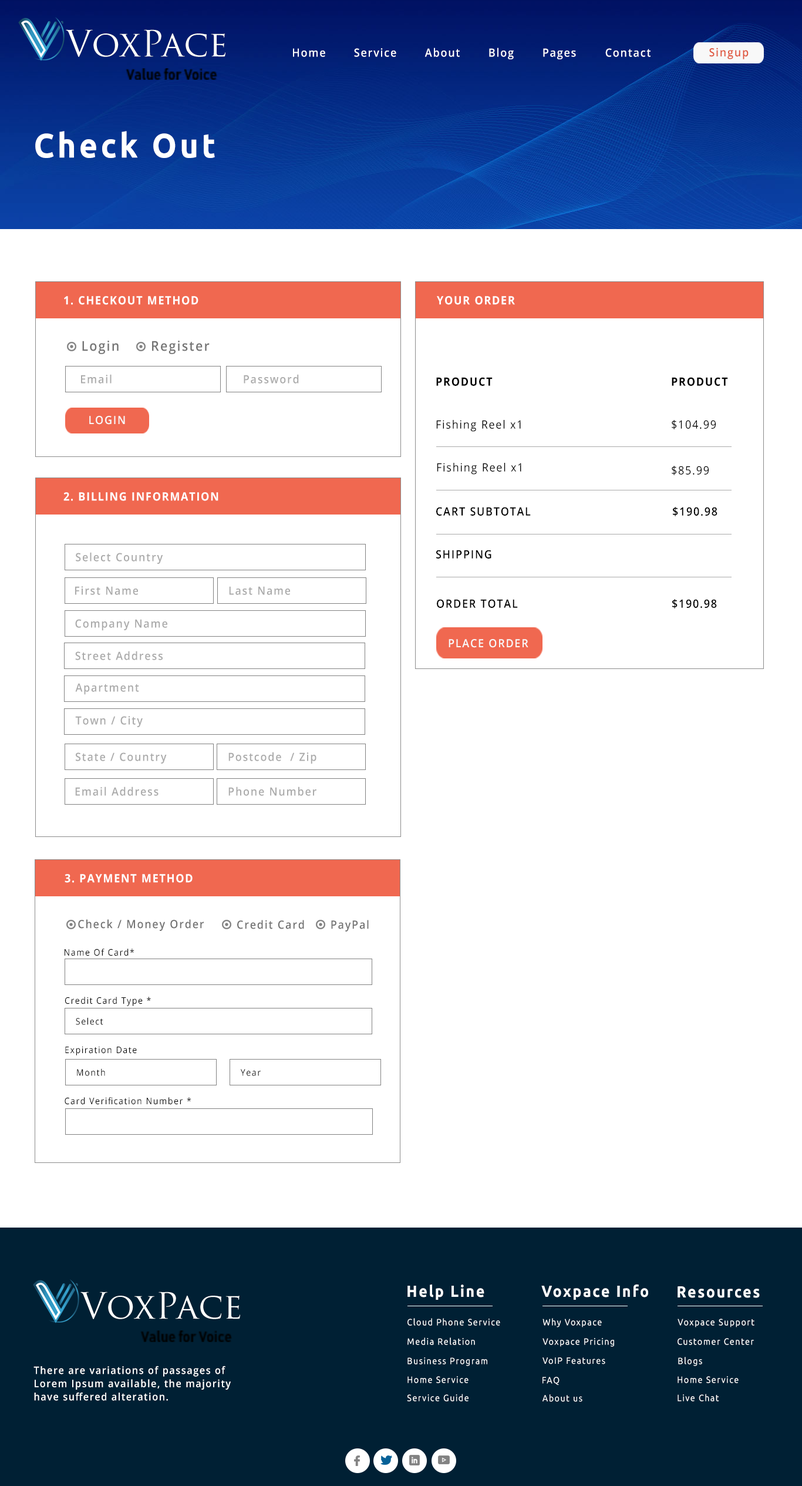
<style>
.page{position:relative;width:802px;height:1486px;background:#ffffff}
.page>*{position:absolute;margin:0}
.t1{font:11.4px "OpenSans-SemiBold";letter-spacing:0.1em;color:#ffffff;scale:0.92 1}
.t2{font:11.4px "OpenSans-SemiBold";letter-spacing:0.1em;color:#e05941;scale:0.92 1}
.t3{font:34.1px "Ubuntu-Bold";letter-spacing:0.1em;color:#ffffff;scale:0.92 1}
.t4{font:11.4px "OpenSans-Bold";letter-spacing:0.1em;color:#ffffff;scale:0.92 1}
.t5{font:13.7px "OpenSans-SemiBold";letter-spacing:0.1em;color:#747474;scale:0.92 1}
.t6{font:11.4px "OpenSans-SemiBold";letter-spacing:0.1em;color:#ababab;scale:0.92 1}
.t7{font:11.4px "OpenSans-Bold";letter-spacing:0.1em;color:#000000;scale:0.92 1}
.t8{font:11.4px "OpenSans-SemiBold";letter-spacing:0.1em;color:#f8f8f8;scale:0.92 1}
.t9{font:11.4px "OpenSans-Regular";letter-spacing:0.1em;color:#000000;scale:0.92 1}
.t10{font:11.4px "OpenSans-SemiBold";letter-spacing:0.1em;color:#000000;scale:0.92 1}
.t11{font:11.4px "OpenSans-SemiBold";letter-spacing:0.1em;color:#747474;scale:0.92 1}
.t12{font:9.1px "OpenSans-Regular";letter-spacing:0.1em;color:#090909;scale:0.92 1}
.t13{font:15.9px "Ubuntu-Bold";letter-spacing:0.1em;color:#ffffff;scale:0.92 1}
.t14{font:9.1px "Ubuntu-Regular";letter-spacing:0.1em;color:#ffffff;scale:0.92 1}
.t15{font:10.2px "OpenSans-SemiBold";letter-spacing:0.1em;color:#ffffff;scale:0.92 1}
</style>
<div class="page">
<p class="t1" style="left:293px;top:48px;width:32px;height:9px">Home</p>
<p class="t1" style="left:354px;top:48px;width:42px;height:9px">Service</p>
<p class="t1" style="left:425px;top:48px;width:35px;height:9px">About</p>
<p class="t1" style="left:489px;top:48px;width:25px;height:11px">Blog</p>
<p class="t1" style="left:543px;top:48px;width:33px;height:11px">Pages</p>
<p class="t1" style="left:606px;top:48px;width:45px;height:9px">Contact</p>
<p class="t2" style="left:710px;top:48px;width:39px;height:11px">Singup</p>
<p class="t3" style="left:35px;top:131px;width:180px;height:27px">Check Out</p>
<p class="t4" style="left:64px;top:296px;width:135px;height:9px">1. CHECKOUT METHOD</p>
<p class="t4" style="left:437px;top:296px;width:78px;height:9px">YOUR ORDER</p>
<p class="t5" style="left:82px;top:341px;width:37px;height:13px">Login</p>
<p class="t5" style="left:152px;top:341px;width:58px;height:13px">Register</p>
<p class="t6" style="left:81px;top:374px;width:31px;height:10px">Email</p>
<p class="t6" style="left:244px;top:374px;width:55px;height:10px">Password</p>
<p class="t7" style="left:436px;top:377px;width:57px;height:9px">PRODUCT</p>
<p class="t7" style="left:672px;top:377px;width:56px;height:9px">PRODUCT</p>
<p class="t8" style="left:89px;top:416px;width:36px;height:9px">LOGIN</p>
<p class="t9" style="left:436px;top:420px;width:85px;height:12px">Fishing Reel x1</p>
<p class="t9" style="left:672px;top:420px;width:44px;height:9px">$104.99</p>
<p class="t9" style="left:437px;top:463px;width:85px;height:12px">Fishing Reel x1</p>
<p class="t9" style="left:672px;top:466px;width:37px;height:9px">$85.99</p>
<p class="t4" style="left:63px;top:492px;width:156px;height:9px">2. BILLING INFORMATION</p>
<p class="t10" style="left:436px;top:507px;width:95px;height:9px">CART SUBTOTAL</p>
<p class="t10" style="left:673px;top:507px;width:45px;height:9px">$190.98</p>
<p class="t6" style="left:76px;top:552px;width:87px;height:12px">Select Country</p>
<p class="t10" style="left:436px;top:550px;width:56px;height:9px">SHIPPING</p>
<p class="t6" style="left:75px;top:586px;width:63px;height:9px">First Name</p>
<p class="t6" style="left:229px;top:586px;width:61px;height:9px">Last Name</p>
<p class="t10" style="left:437px;top:599px;width:81px;height:9px">ORDER TOTAL</p>
<p class="t10" style="left:673px;top:599px;width:44px;height:10px">$190.98</p>
<p class="t6" style="left:75px;top:619px;width:92px;height:12px">Company Name</p>
<p class="t8" style="left:449px;top:639px;width:80px;height:9px">PLACE ORDER</p>
<p class="t6" style="left:75px;top:651px;width:88px;height:9px">Street Address</p>
<p class="t6" style="left:75px;top:683px;width:64px;height:12px">Apartment</p>
<p class="t6" style="left:75px;top:716px;width:68px;height:11px">Town / City</p>
<p class="t6" style="left:76px;top:752px;width:91px;height:12px">State / Country</p>
<p class="t6" style="left:228px;top:752px;width:89px;height:12px">Postcode  / Zip</p>
<p class="t6" style="left:75px;top:787px;width:84px;height:9px">Email Address</p>
<p class="t6" style="left:228px;top:787px;width:89px;height:9px">Phone Number</p>
<p class="t4" style="left:65px;top:874px;width:128px;height:9px">3. PAYMENT METHOD</p>
<p class="t11" style="left:78px;top:919px;width:126px;height:12px">Check / Money Order</p>
<p class="t11" style="left:237px;top:920px;width:67px;height:9px">Credit Card</p>
<p class="t11" style="left:331px;top:920px;width:38px;height:12px">PayPal</p>
<p class="t12" style="left:65px;top:949px;width:70px;height:7px">Name Of Card*</p>
<p class="t12" style="left:65px;top:997px;width:86px;height:9px">Credit Card Type *</p>
<p class="t12" style="left:76px;top:1017px;width:27px;height:8px">Select</p>
<p class="t12" style="left:65px;top:1046px;width:72px;height:10px">Expiration Date</p>
<p class="t12" style="left:77px;top:1068px;width:28px;height:8px">Month</p>
<p class="t12" style="left:240px;top:1069px;width:21px;height:7px">Year</p>
<p class="t12" style="left:65px;top:1097px;width:126px;height:8px">Card Verification Number *</p>
<p class="t13" style="left:408px;top:1284px;width:77px;height:16px">Help Line</p>
<p class="t13" style="left:542px;top:1284px;width:106px;height:16px">Voxpace Info</p>
<p class="t13" style="left:678px;top:1286px;width:82px;height:12px">Resources</p>
<p class="t14" style="left:408px;top:1318px;width:92px;height:8px">Cloud Phone Service</p>
<p class="t14" style="left:543px;top:1318px;width:59px;height:10px">Why Voxpace</p>
<p class="t14" style="left:678px;top:1319px;width:77px;height:9px">Voxpace Support</p>
<p class="t14" style="left:408px;top:1338px;width:67px;height:7px">Media Relation</p>
<p class="t14" style="left:543px;top:1338px;width:71px;height:9px">Voxpace Pricing</p>
<p class="t14" style="left:678px;top:1338px;width:76px;height:7px">Customer Center</p>
<p class="t14" style="left:408px;top:1357px;width:80px;height:9px">Business Program</p>
<p class="t14" style="left:543px;top:1357px;width:63px;height:8px">VoIP Features</p>
<p class="t14" style="left:678px;top:1357px;width:25px;height:9px">Blogs</p>
<p class="t15" style="left:33px;top:1366px;width:198px;height:35px">There are variations of passages of <br>Lorem Ipsum available, the majority <br>have suffered alteration.</p>
<p class="t14" style="left:408px;top:1376px;width:61px;height:7px">Home Service</p>
<p class="t14" style="left:543px;top:1377px;width:17px;height:8px">FAQ</p>
<p class="t14" style="left:678px;top:1376px;width:61px;height:7px">Home Service</p>
<p class="t14" style="left:407px;top:1394px;width:62px;height:8px">Service Guide</p>
<p class="t14" style="left:543px;top:1394px;width:40px;height:8px">About us</p>
<p class="t14" style="left:678px;top:1394px;width:42px;height:8px">Live Chat</p>
</div>
